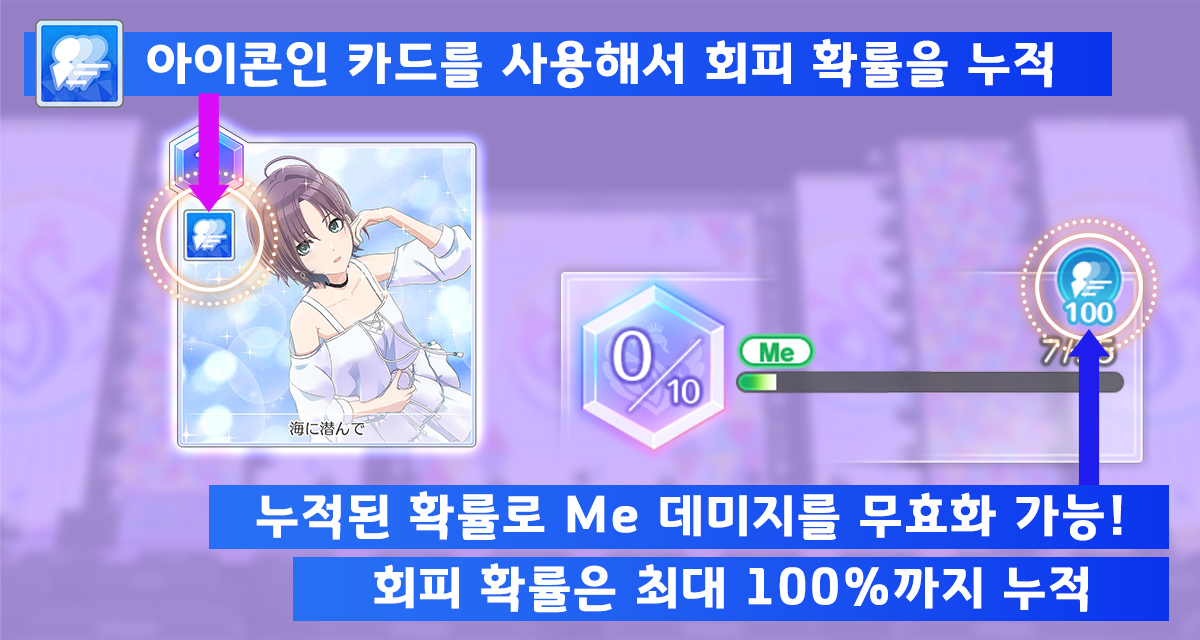
<style>
.page{position:relative;width:1200px;height:640px}
.page>*{position:absolute;margin:0}
.t1{font:50.7px "GyeonggiTitleB";letter-spacing:0.05em;color:#ffffff}
</style>
<div class="page">
<p class="t1" style="left:147px;top:38px;width:906px;height:51px">아이콘인 카드를 사용해서 회피 확률을 누적</p>
<p class="t1" style="left:256px;top:491px;width:866px;height:50px">누적된 확률로 Me 데미지를 무효화 가능!</p>
<p class="t1" style="left:374px;top:563px;width:714px;height:50px">회피 확률은 최대 100%까지 누적</p>
</div>
